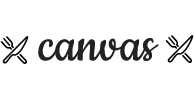
<style>
.page{position:relative;width:194px;height:100px;background:#ffffff}
.page>*{position:absolute;margin:0}
.t1{font:59px "Cookie-Regular";color:#222222}
</style>
<div class="page">
<p class="t1" style="left:38px;top:38px;width:121px;height:23px">canvas</p>
</div>
